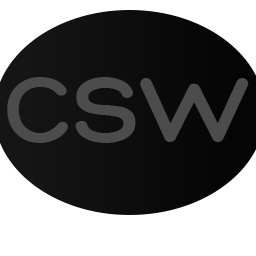
<style>
.page{position:relative;width:256px;height:256px;background:#ffffff}
.page>*{position:absolute;margin:0}
.t1{font:100px "Hero-Bold";color:#4c4c4c}
</style>
<div class="page">
<p class="t1" style="left:7px;top:77px;width:242px;height:66px">CSW</p>
</div>
